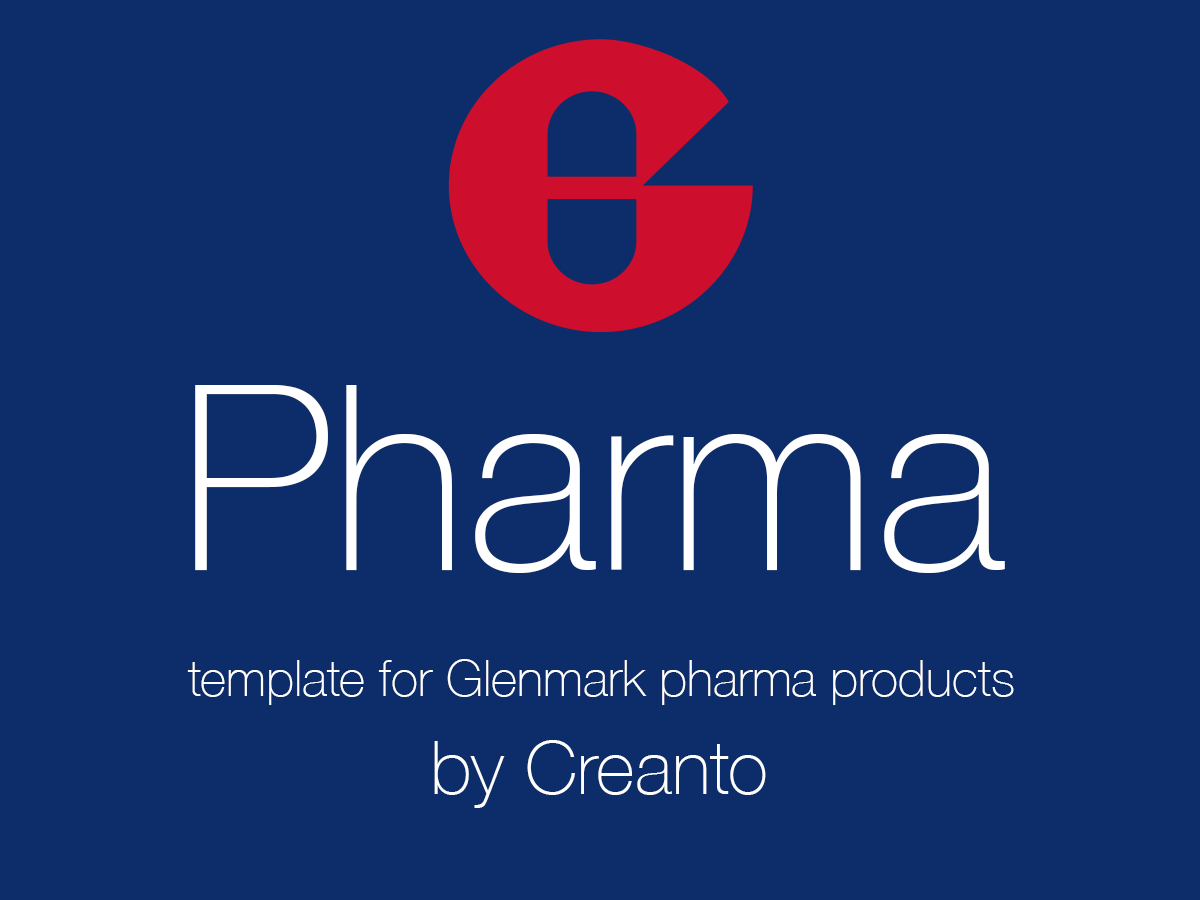
<style>
.page{position:relative;width:1200px;height:900px;background:#0c2d69}
.page>*{position:absolute;margin:0}
.t1{font:259.5px "HelveticaNeue-Thin";color:#ffffff}
.t2{font:50px "HelveticaNeue-Thin";color:#ffffff}
.t3{font:74px "HelveticaNeue-Thin";color:#ffffff}
</style>
<div class="page">
<p class="t1" style="left:195px;top:385px;width:810px;height:188px">Pharma</p>
<p class="t2" style="left:187px;top:659px;width:827px;height:46px">template for Glenmark pharma products</p>
<p class="t3" style="left:434px;top:740px;width:332px;height:68px">by Creanto</p>
</div>
